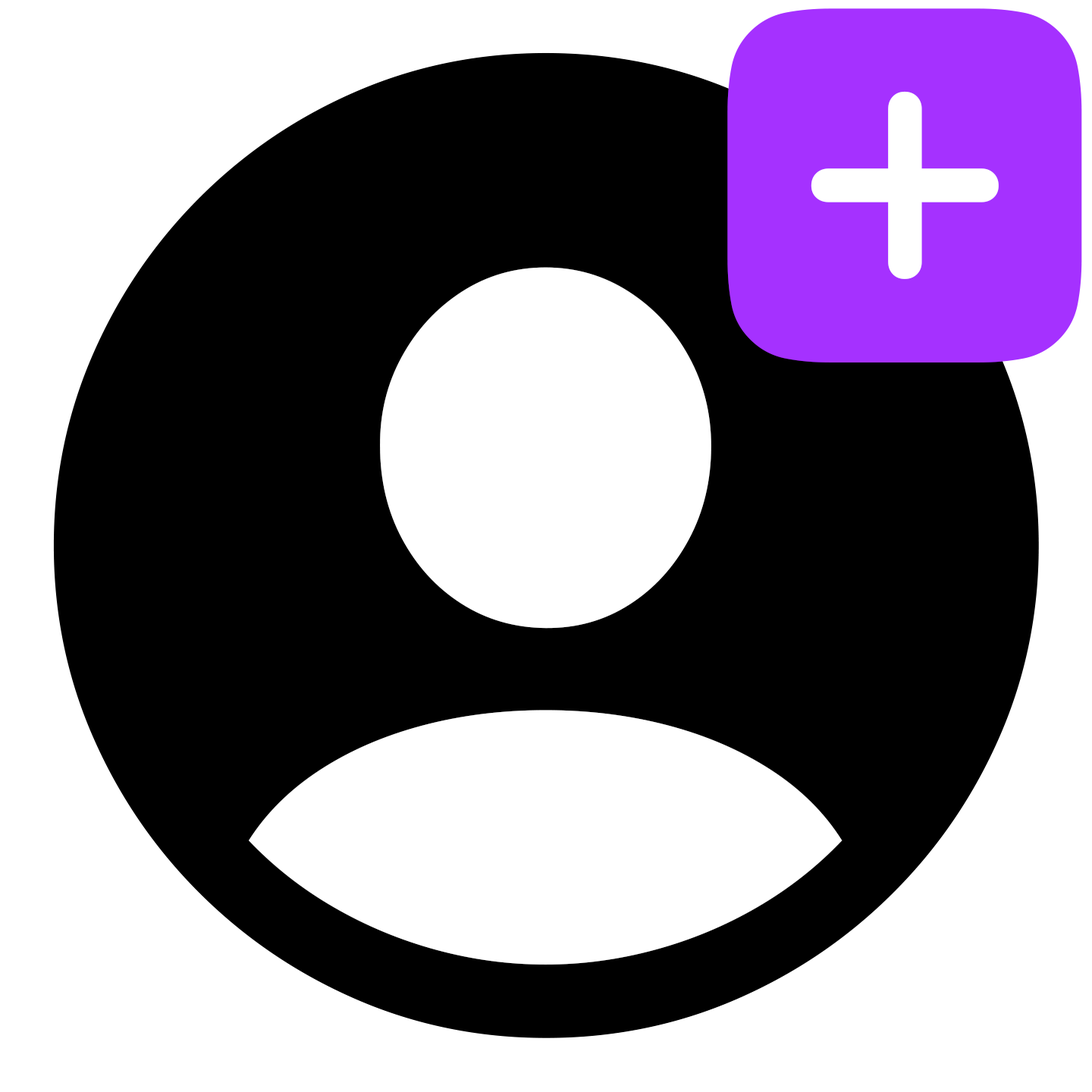
<style>
.page{position:relative;width:1092px;height:1092px;background:#ffffff}
.page>*{position:absolute;margin:0}
.t1{font:398.4px "SFPro-Regular";color:#a531ff}
</style>
<div class="page">
<p class="t1" style="left:727px;top:8px;width:355px;height:354px">􀑎</p>
</div>
